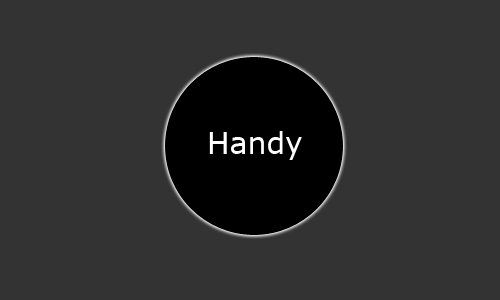
<style>
.page{position:relative;width:500px;height:300px;background:#333333}
.page>*{position:absolute;margin:0}
.t1{font:30px "Verdana";color:#ffffff}
</style>
<div class="page">
<p class="t1" style="left:209px;top:131px;width:93px;height:29px">Handy</p>
</div>
